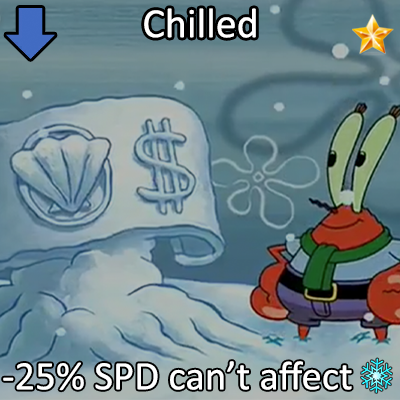
<style>
.page{position:relative;width:400px;height:400px}
.page>*{position:absolute;margin:0}
.t1{font:72px "Calibri";color:#ffffff}
.t2{font:70px "Calibri";color:#ffffff}
</style>
<div class="page">
<p class="t1" style="left:144px;top:8px;width:112px;height:30px">Chilled</p>
<p class="t2" style="left:3px;top:361px;width:349px;height:30px">-25% SPD can’t affect</p>
</div>
